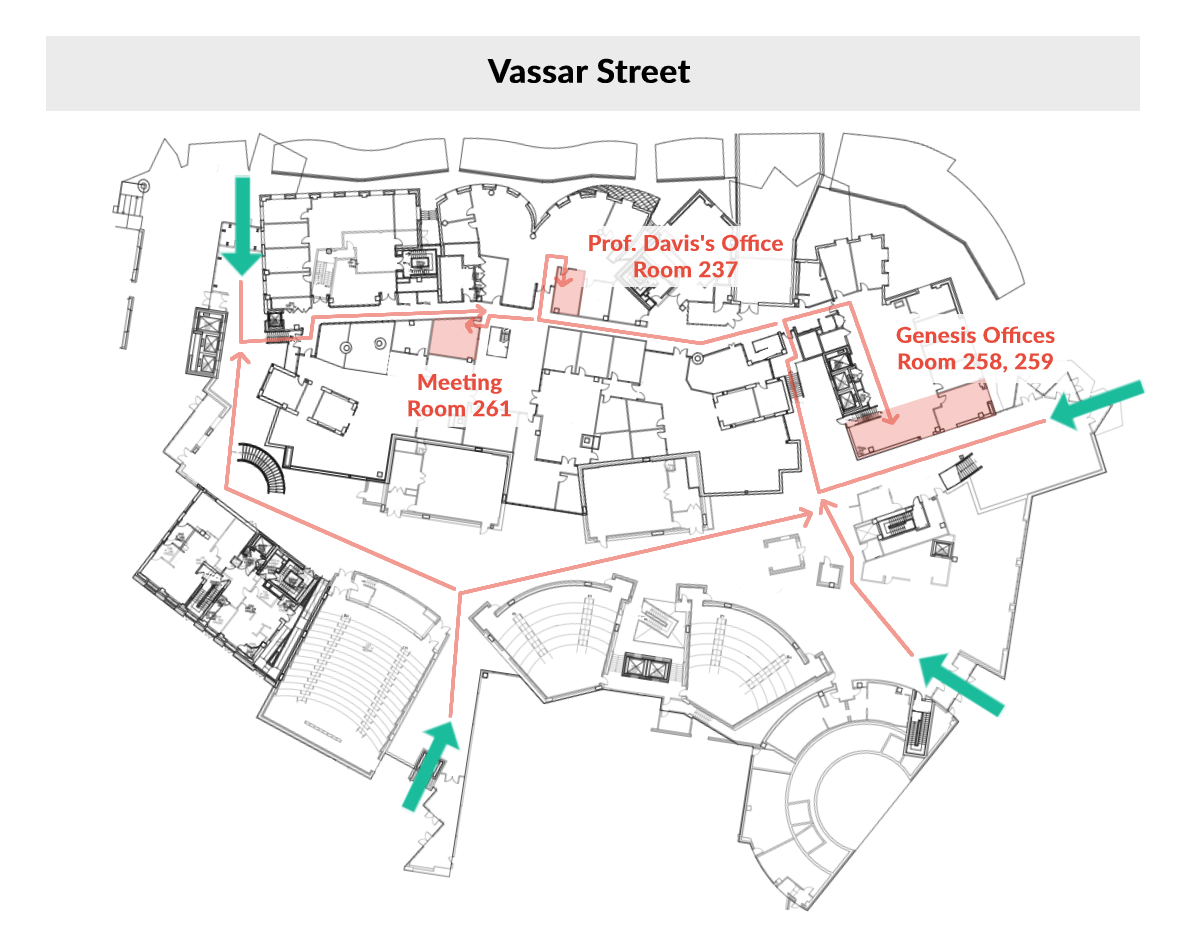
<style>
.page{position:relative;width:1186px;height:942px;background:#ffffff}
.page>*{position:absolute;margin:0}
.t1{font:33px "Lato-Bold";color:#000000;font-weight:bold}
.t2{font:22px "Lato-Bold";color:#e74c3c;font-weight:bold}
</style>
<div class="page">
<p class="t1" style="left:487px;top:58px;width:204px;height:26px">Vassar Street</p>
<p class="t2" style="left:589px;top:234px;width:194px;height:44px;text-align:center">Prof. Davis's Office<br>Room 237</p>
<p class="t2" style="left:896px;top:326px;width:159px;height:47px;text-align:center">Genesis Offices Room 258, 259</p>
<p class="t2" style="left:408px;top:373px;width:103px;height:44px;text-align:center">Meeting <br>Room 261</p>
</div>
